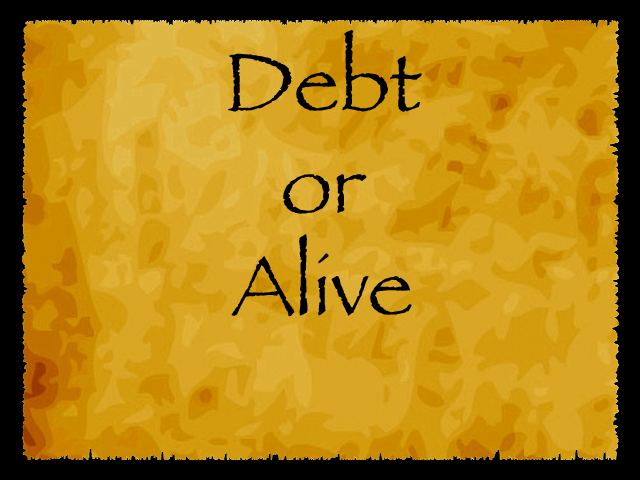
<style>
.page{position:relative;width:640px;height:480px}
.page>*{position:absolute;margin:0}
.t1{font:85px "Papyrus";color:#000000}
</style>
<div class="page">
<p class="t1" style="left:228px;top:30px;width:194px;height:287px;text-align:center">Debt <br>or<br>Alive</p>
</div>
